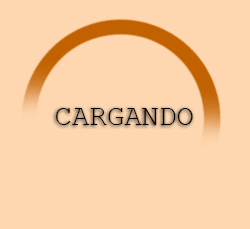
<style>
.page{position:relative;width:250px;height:229px;background:#fed6af}
.page>*{position:absolute;margin:0}
.t1{font:29px "CourierNewPSMT";color:#000000}
</style>
<div class="page">
<p class="t1" style="left:56px;top:108px;width:137px;height:17px">CARGANDO</p>
</div>
